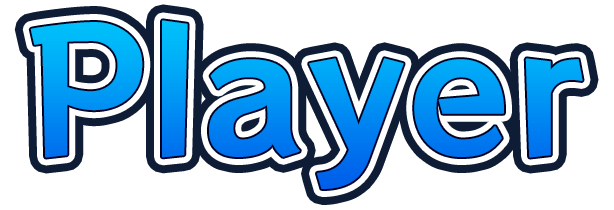
<style>
.page{position:relative;width:614px;height:210px;background:#ffffff}
.page>*{position:absolute;margin:0}
.t1{font:166.7px "RocknRollOne-Regular";font-weight:bold}
</style>
<div class="page">
<p class="t1" style="left:30px;top:20px;width:553px;height:169px">Player</p>
</div>
